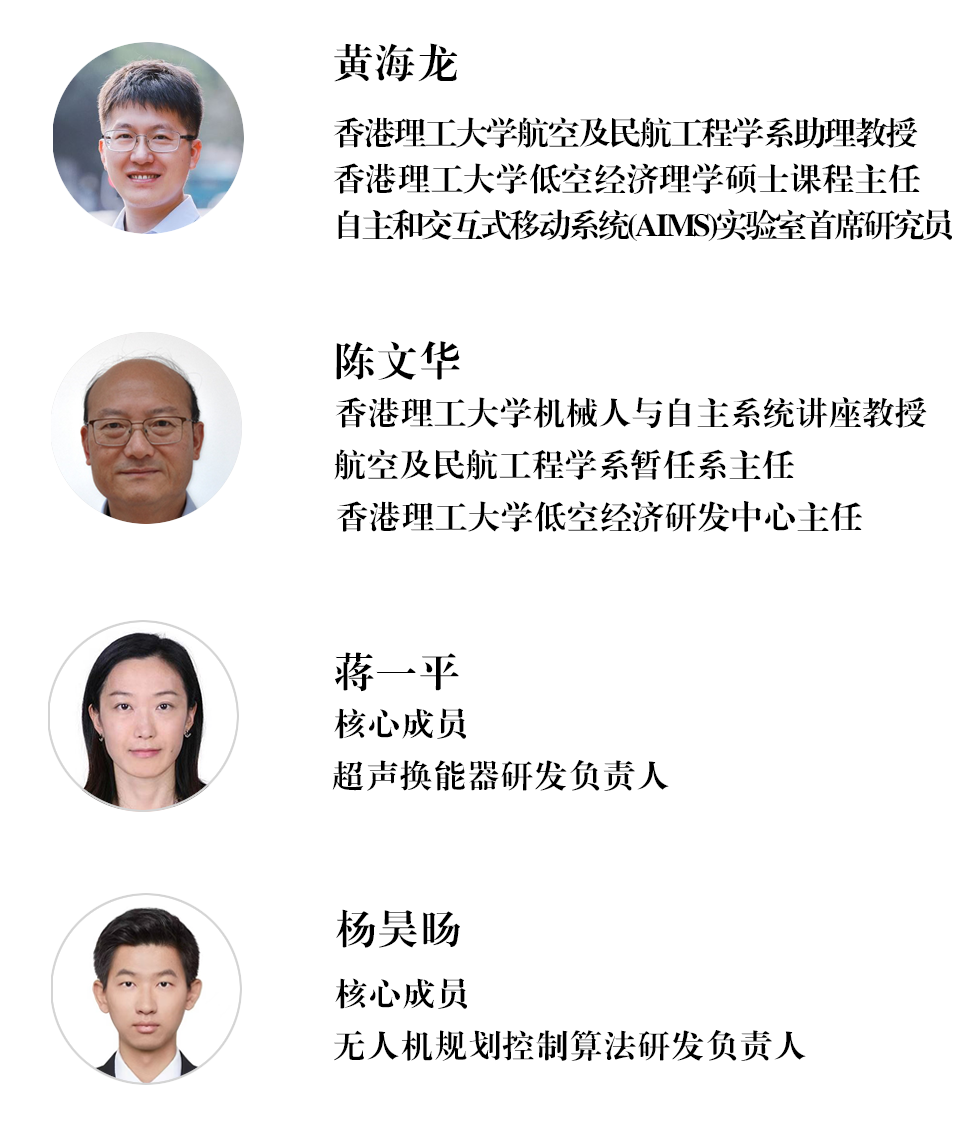
<style>
.page{position:relative;width:969px;height:1140px;background:#ffffff}
.page>*{position:absolute;margin:0}
.t1{font:40px "FZXBSK--GBK1-0";letter-spacing:0.06em;color:#000000}
.t2{font:32px "FZXBSK--GBK1-0";letter-spacing:-0.04em;color:#000000}
.t3{font:32px "FZXBSK--GBK1-0";letter-spacing:0.02em;color:#000000}
.t4{font:32px "FZXBSK--GBK1-0";letter-spacing:-0.08em;color:#000000}
.t5{font:32px "FZXBSK--GBK1-0";letter-spacing:0.03em;color:#000000}
.t6{font:32px "FZXBSK--GBK1-0";letter-spacing:0.06em;color:#000000}
</style>
<div class="page">
<p class="t1" style="left:334px;top:43px;width:124px;height:39px">黄海龙</p>
<p class="t2" style="left:333px;top:117px;width:585px;height:32px">香港理工大学航空及民航工程学系助理教授</p>
<p class="t3" style="left:333px;top:163px;width:587px;height:31px">香港理工大学低空经济理学硕士课程主任</p>
<p class="t4" style="left:338px;top:208px;width:614px;height:34px">自主和交互式移动系统(AIMS)实验室首席研究员</p>
<p class="t1" style="left:336px;top:341px;width:124px;height:39px">陈文华</p>
<p class="t5" style="left:335px;top:397px;width:592px;height:31px">香港理工大学机械人与自主系统讲座教授</p>
<p class="t5" style="left:334px;top:449px;width:460px;height:31px">航空及民航工程学系暂任系主任</p>
<p class="t5" style="left:336px;top:501px;width:526px;height:31px">香港理工大学低空经济研发中心主任</p>
<p class="t1" style="left:335px;top:652px;width:124px;height:40px">蒋一平</p>
<p class="t6" style="left:334px;top:708px;width:132px;height:31px">核心成员</p>
<p class="t6" style="left:332px;top:760px;width:337px;height:31px">超声换能器研发负责人</p>
</div>
